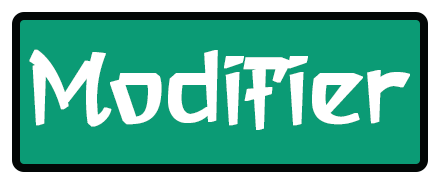
<style>
.page{position:relative;width:439px;height:185px;background:#0b9b75}
.page>*{position:absolute;margin:0}
.t1{font:98.3px "aAsianHiro";color:#ffffff;font-weight:bold}
</style>
<div class="page">
<p class="t1" style="left:29px;top:49px;width:381px;height:81px">Modifier</p>
</div>
